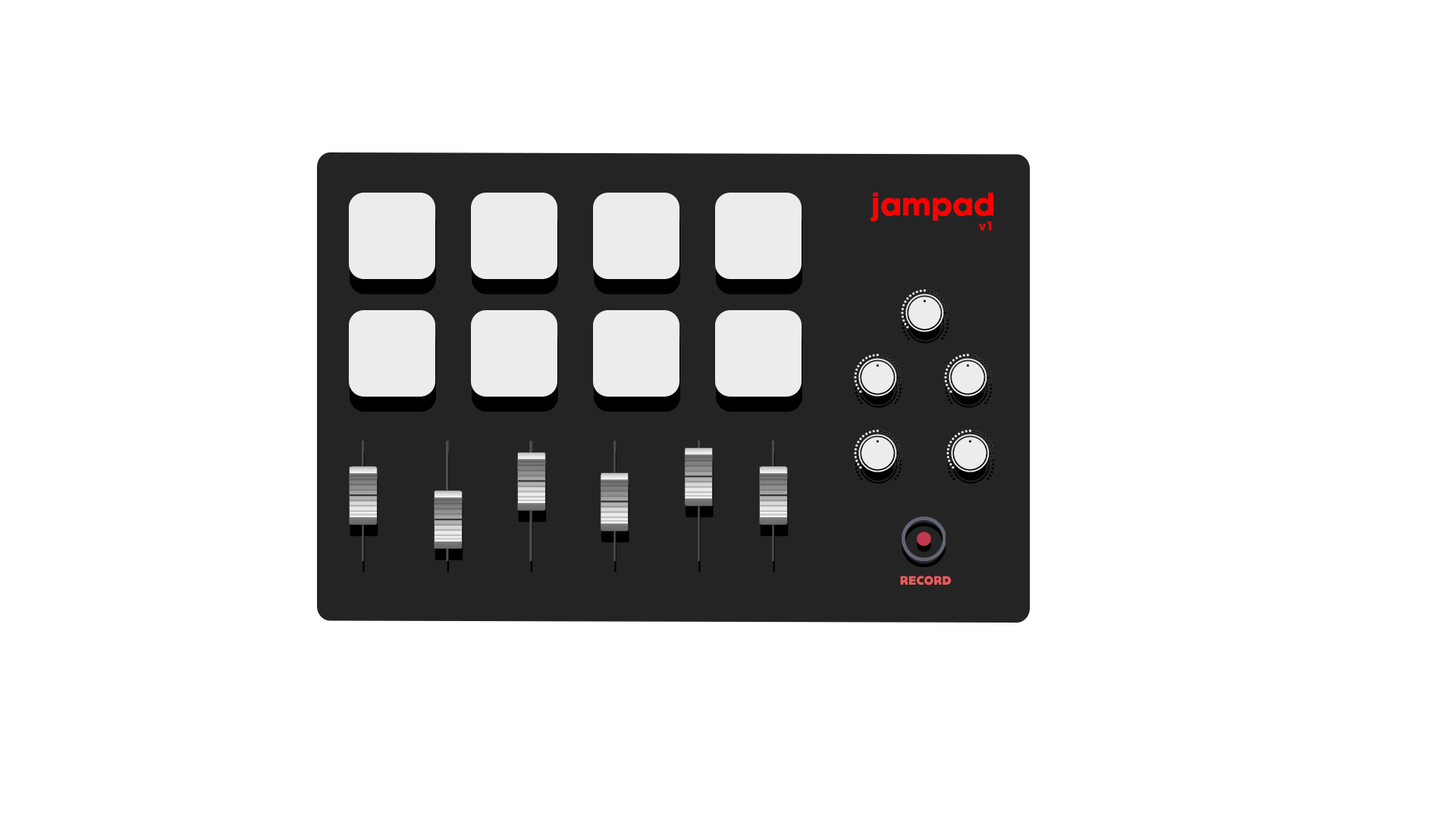
<style>
.page{position:relative;width:1456px;height:819px;background:#ffffff}
.page>*{position:absolute;margin:0}
.t1{font:30.3px "AvantGardeLT-Bold";color:#ff0000}
.t2{font:12.1px "AvantGardeLT-Bold";color:#ff0000}
.t3{font:12.1px "Aquino-Demo";color:#e65c5c}
</style>
<div class="page">
<p class="t1" style="left:871px;top:193px;width:122px;height:28px">jampad</p>
<p class="t2" style="left:979px;top:221px;width:12px;height:10px">v1</p>
<p class="t3" style="left:900px;top:576px;width:51px;height:9px">RECORD</p>
</div>
